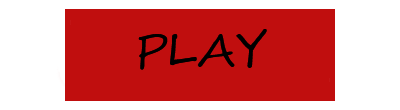
<style>
.page{position:relative;width:400px;height:110px;background:#c00e0e}
.page>*{position:absolute;margin:0}
.t1{font:45px "SegoeScript";color:#000000}
</style>
<div class="page">
<p class="t1" style="left:138px;top:29px;width:129px;height:41px">PLAY</p>
</div>
